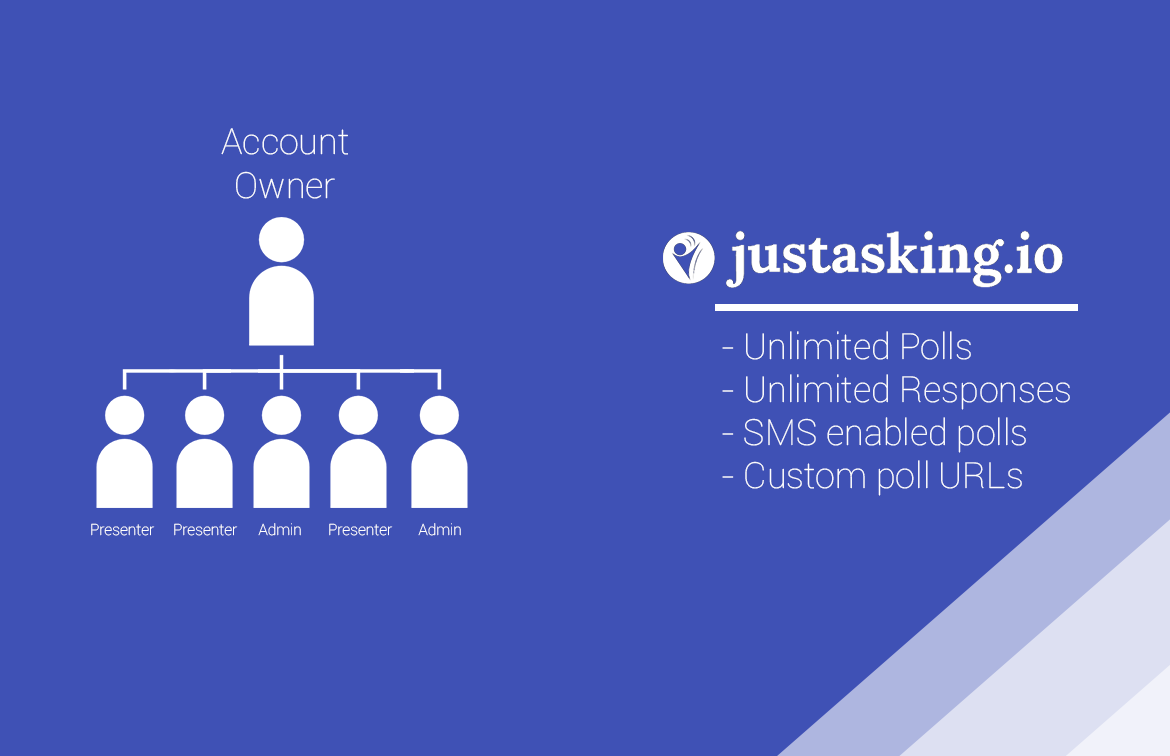
<style>
.page{position:relative;width:1170px;height:756px;background:#3f51b5}
.page>*{position:absolute;margin:0}
.t1{font:35.9px "Roboto-Thin";color:#ffffff}
.t2{font:15.5px "Roboto-Thin";color:#ffffff}
</style>
<div class="page">
<p class="t1" style="left:221px;top:128px;width:127px;height:71px;text-align:center">Account<br>Owner</p>
<p class="t1" style="left:722px;top:331px;width:348px;height:165px">- Unlimited Polls<br>- Unlimited Responses<br>- SMS enabled polls<br>- Custom poll URLs</p>
<p class="t2" style="left:91px;top:523px;width:64px;height:13px">Presenter</p>
<p class="t2" style="left:174px;top:523px;width:64px;height:13px">Presenter</p>
<p class="t2" style="left:258px;top:523px;width:43px;height:13px">Admin</p>
<p class="t2" style="left:329px;top:523px;width:64px;height:13px">Presenter</p>
<p class="t2" style="left:418px;top:523px;width:43px;height:13px">Admin</p>
</div>
